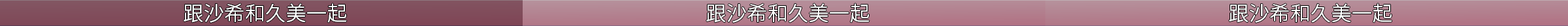
<style>
.page{position:relative;width:1568px;height:26px}
.page>*{position:absolute;margin:0}
.t1{font:20.6px "SourceHanSansSC-Normal";color:#ffffff}
</style>
<div class="page">
<p class="t1" style="left:184px;top:3px;width:163px;height:20px">跟沙希和久美一起</p>
<p class="t1" style="left:706px;top:3px;width:164px;height:20px">跟沙希和久美一起</p>
<p class="t1" style="left:1229px;top:3px;width:163px;height:20px">跟沙希和久美一起</p>
</div>
